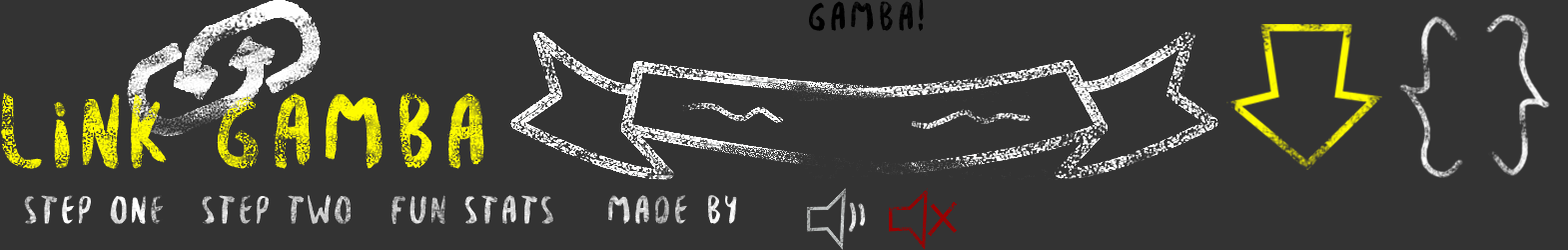
<style>
.page{position:relative;width:1568px;height:250px;background:#333333}
.page>*{position:absolute;margin:0}
.t1{font:43.2px "Besom";letter-spacing:0.05em;color:#000000}
.t2{font:110.6px "Besom";letter-spacing:0.05em}
.t3{font:41.9px "Besom";letter-spacing:0.05em}
</style>
<div class="page">
<p class="t1" style="left:809px;top:0px;width:115px;height:31px">GAMBA!</p>
<p class="t2" style="left:1px;top:92px;width:483px;height:77px">LINK GAMBA</p>
<p class="t3" style="left:24px;top:195px;width:140px;height:29px">STEP ONE</p>
<p class="t3" style="left:202px;top:195px;width:150px;height:29px">STEP TWO</p>
<p class="t3" style="left:392px;top:195px;width:161px;height:29px">fUN STATS</p>
<p class="t3" style="left:608px;top:195px;width:129px;height:29px">MADE BY</p>
</div>
